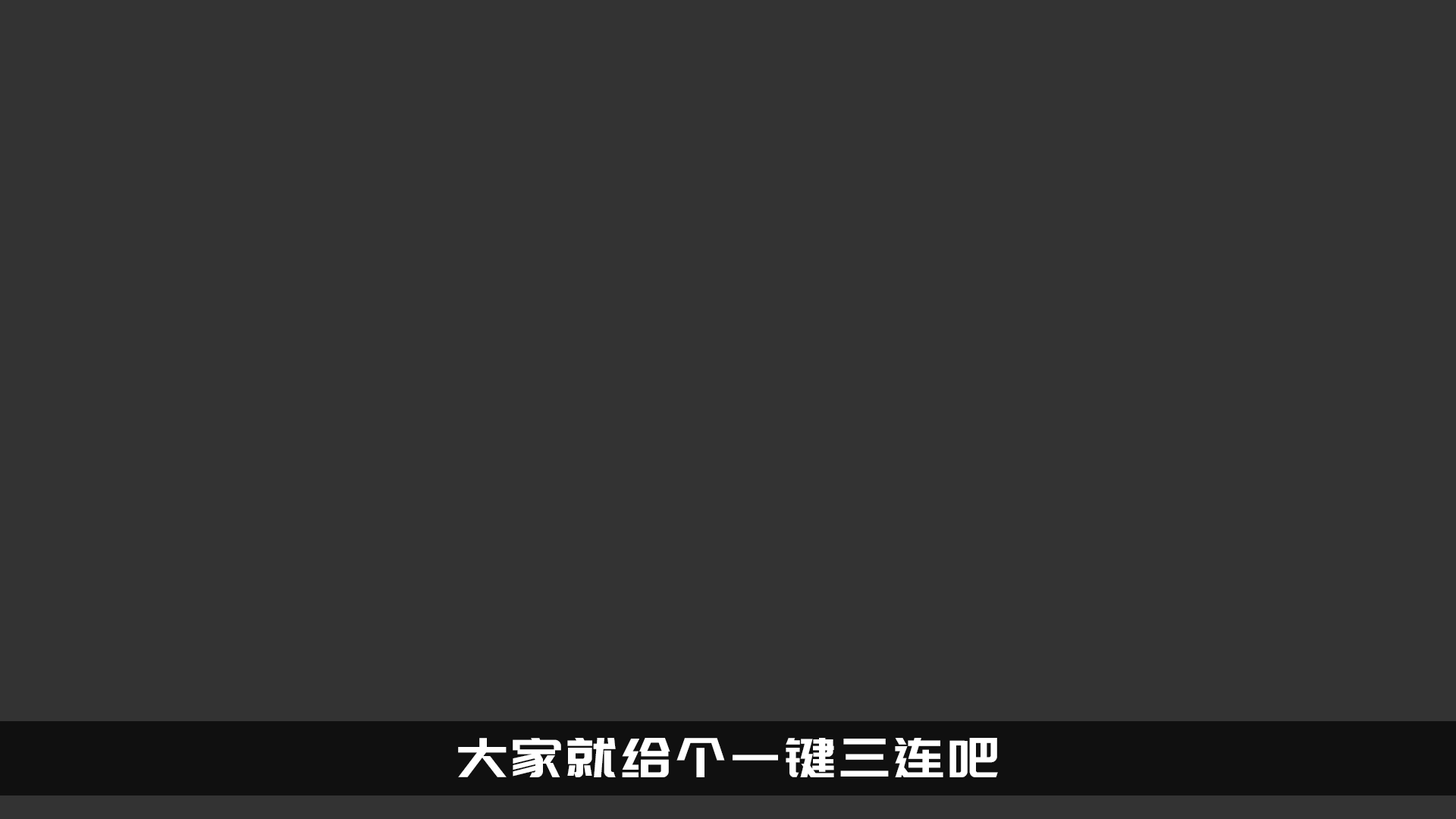
<style>
.page{position:relative;width:1456px;height:819px;background:#333333}
.page>*{position:absolute;margin:0}
.t1{font:54.6px "PangMenZhengDao-3";color:#ffffff}
</style>
<div class="page">
<p class="t1" style="left:458px;top:738px;width:540px;height:39px">大家就给个一键三连吧</p>
</div>
